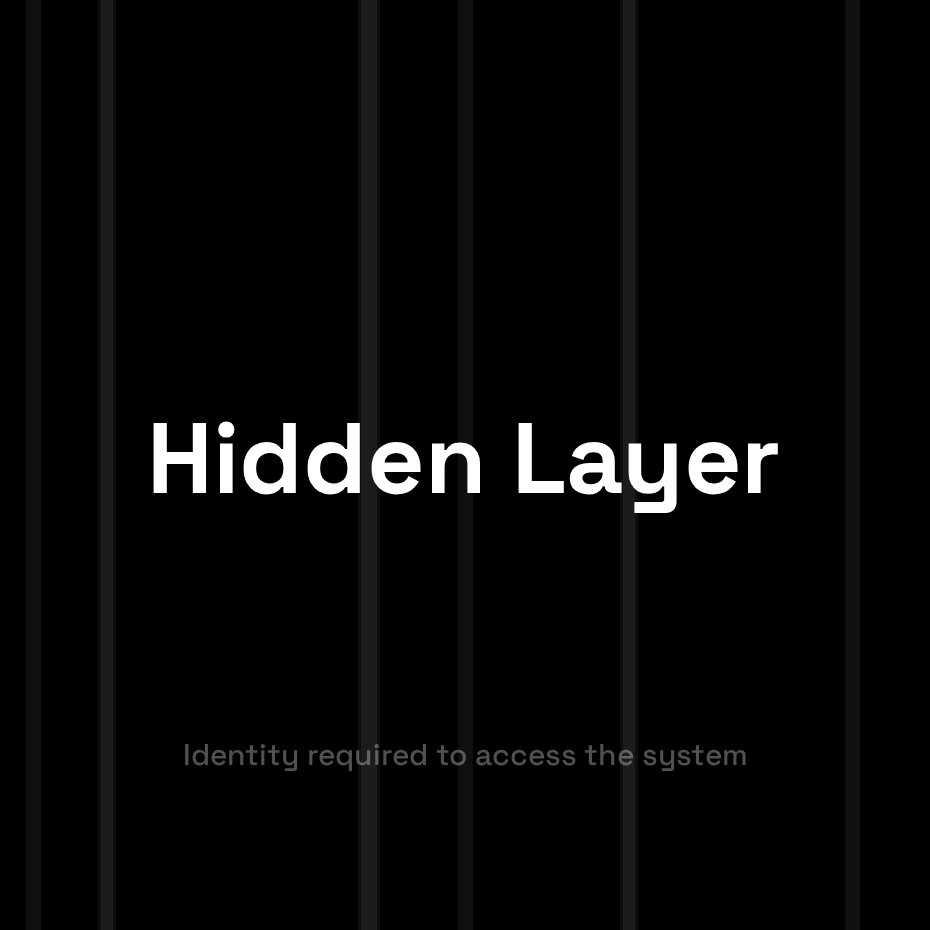
<style>
.page{position:relative;width:930px;height:930px;background:#000000}
.page>*{position:absolute;margin:0}
.t1{font:100px "SpaceGroteskLight-Bold";color:#ffffff}
.t2{font:30px "SpaceGroteskLight-Medium";color:#515151}
</style>
<div class="page">
<p class="t1" style="left:153px;top:421px;width:625px;height:92px">Hidden Layer</p>
<p class="t2" style="left:185px;top:743px;width:561px;height:28px">Identity required to access the system</p>
</div>
